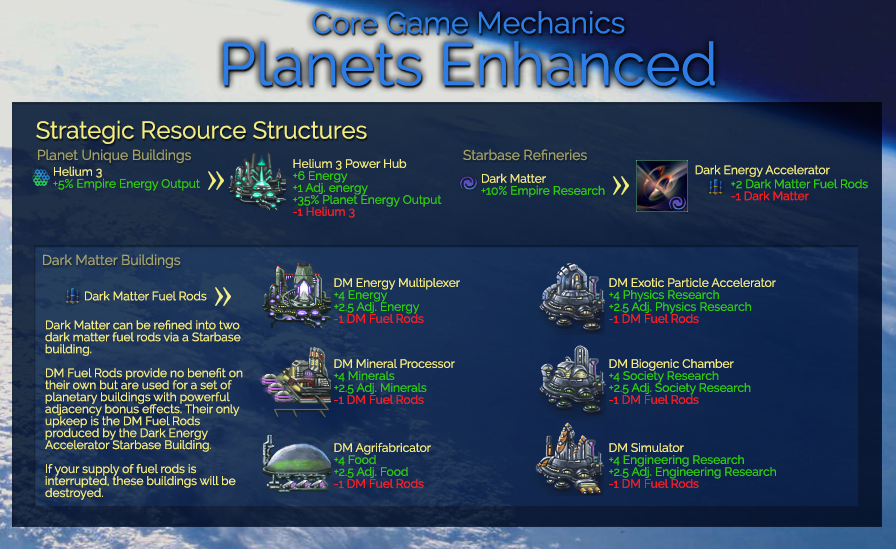
<style>
.page{position:relative;width:896px;height:549px}
.page>*{position:absolute;margin:0}
.t1{font:30px/52px "Raleway";color:#2d7de4}
.t2{font:60px/52px "Raleway";color:#2d7de4}
.t3{font:24px "Raleway";color:#f4ed81}
.t4{font:14px "Raleway";color:#a1a067}
.t5{font:12px/12px "Raleway";color:#31cf00}
.t6{font:12px/12px "Raleway";color:#f4ed81}
.t7{font:12px/12px "Raleway";color:#fc1e1e}
.t8{font:12px/14px "Raleway";color:#31cf00}
.t9{font:14px "Raleway";color:#a2a36f}
.t10{font:12px "Raleway";color:#f4ed81}
</style>
<div class="page">
<p class="t1" style="left:223px;top:11px;width:492px;height:75px;text-align:center">Core Game Mechanics<br><span class="t2">Planets Enhanced</span></p>
<p class="t3" style="left:36px;top:120px;width:331px;height:24px">Strategic Resource Structures</p>
<p class="t4" style="left:38px;top:149px;width:153px;height:15px">Planet Unique Buildings</p>
<p class="t4" style="left:463px;top:149px;width:124px;height:12px">Starbase Refineries</p>
<p class="t5" style="left:293px;top:159px;width:149px;height:59px"><span class="t6">Helium 3 Power Hub<br></span>+6 Energy<br>+1 Adj. energy<br>+35% Planet Energy Output<br><span class="t7">-1 Helium 3</span></p>
<p class="t5" style="left:53px;top:166px;width:147px;height:25px"><span class="t6">Helium 3<br></span>+5% Empire Energy Output</p>
<p class="t5" style="left:481px;top:173px;width:124px;height:25px"><span class="t6">Dark Matter<br></span>+10% Empire Research</p>
<p class="t8" style="left:695px;top:165px;width:173px;height:36px"><span class="t6">Dark Energy Accelerator<br></span>    +2 Dark Matter Fuel Rods<br><span class="t7">   -1 Dark Matter</span></p>
<p class="t9" style="left:43px;top:254px;width:138px;height:15px">Dark Matter Buildings</p>
<p class="t5" style="left:334px;top:278px;width:126px;height:45px"><span class="t6">DM Energy Multiplexer<br></span>+4 Energy<br>+2.5 Adj. Energy<br><span class="t7">-1 DM Fuel Rods</span></p>
<p class="t5" style="left:609px;top:278px;width:167px;height:45px"><span class="t6">DM Exotic Particle Accelerator<br></span>+4 Physics Research<br>+2.5 Adj. Physics Research<br><span class="t7">-1 DM Fuel Rods</span></p>
<p class="t10" style="left:85px;top:291px;width:122px;height:10px">Dark Matter Fuel Rods</p>
<p class="t6" style="left:45px;top:320px;width:198px;height:180px">Dark Matter can be refined into two dark matter fuel rods via a Starbase building. <br><br>DM Fuel Rods provide no benefit on their own but are used for a set of planetary buildings with powerful adjacency bonus effects. Their only upkeep is the DM Fuel Rods produced by the Dark Energy Accelerator Starbase Building.<br><br>If your supply of fuel rods is interrupted, these buildings will be destroyed.</p>
<p class="t5" style="left:334px;top:359px;width:121px;height:45px"><span class="t6">DM Mineral Processor<br></span>+4 Minerals<br>+2.5 Adj. Minerals<br><span class="t7">-1 DM Fuel Rods</span></p>
<p class="t5" style="left:609px;top:359px;width:142px;height:45px"><span class="t6">DM Biogenic Chamber<br></span>+4 Society Research<br>+2.5 Adj. Society Research<br><span class="t7">-1 DM Fuel Rods</span></p>
<p class="t5" style="left:334px;top:442px;width:97px;height:46px"><span class="t6">DM Agrifabricator<br></span>+4 Food<br>+2.5 Adj. Food<br><span class="t7">-1 DM Fuel Rods</span></p>
<p class="t5" style="left:609px;top:443px;width:167px;height:45px"><span class="t6">DM Simulator<br></span>+4 Engineering Research<br>+2.5 Adj. Engineering Research<br><span class="t7">-1 DM Fuel Rods</span></p>
</div>
